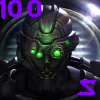
<style>
.page{position:relative;width:100px;height:100px}
.page>*{position:absolute;margin:0}
.t1{font:24px "StarcraftNormal";color:#8300fe}
.t2{font:22px "StarcraftNormal";color:#8300fe}
</style>
<div class="page">
<p class="t1" style="left:0px;top:0px;width:42px;height:20px">100</p>
<p class="t2" style="left:76px;top:80px;width:21px;height:15px">S</p>
</div>
